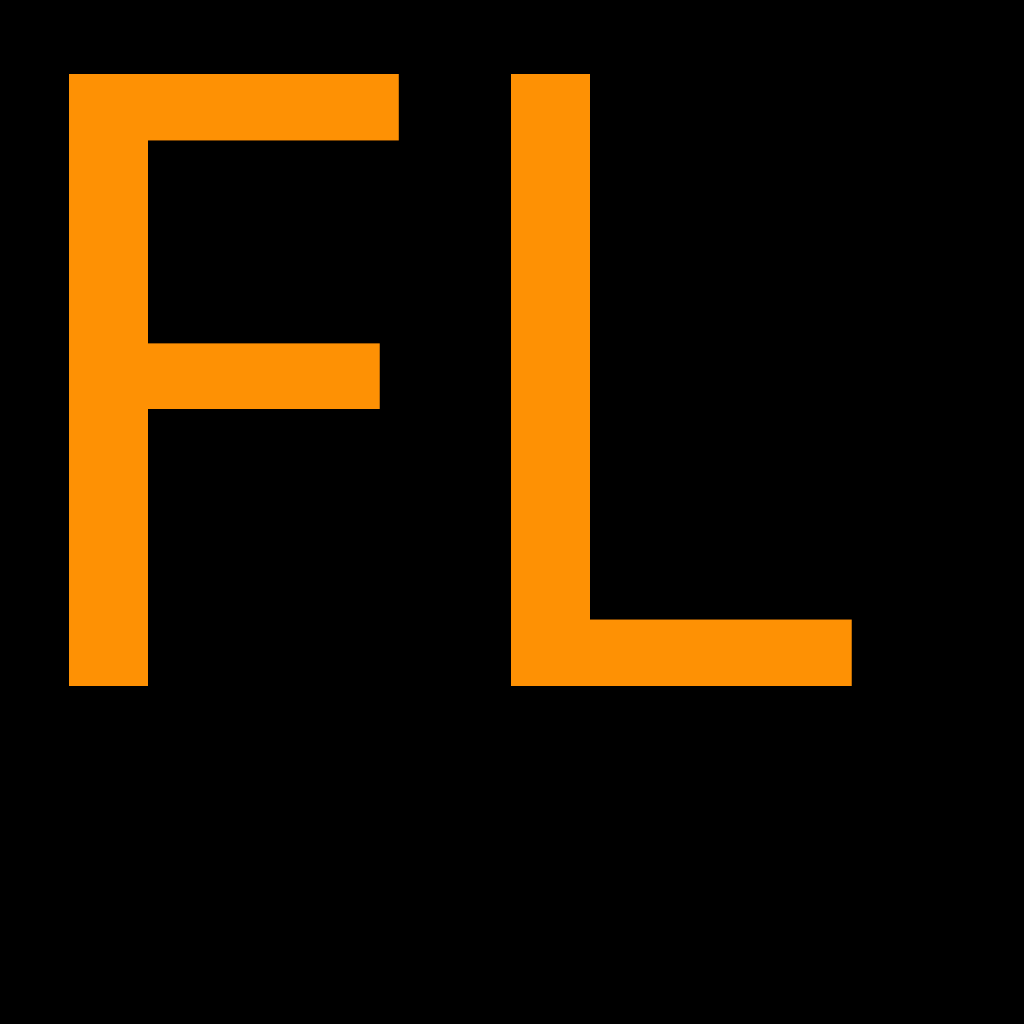
<style>
.page{position:relative;width:1024px;height:1024px;background:#000000}
.page>*{position:absolute;margin:0}
.t1{font:908.3px "MyriadPro-Regular";color:#fe9104}
</style>
<div class="page">
<p class="t1" style="left:69px;top:74px;width:783px;height:612px">FL</p>
</div>
